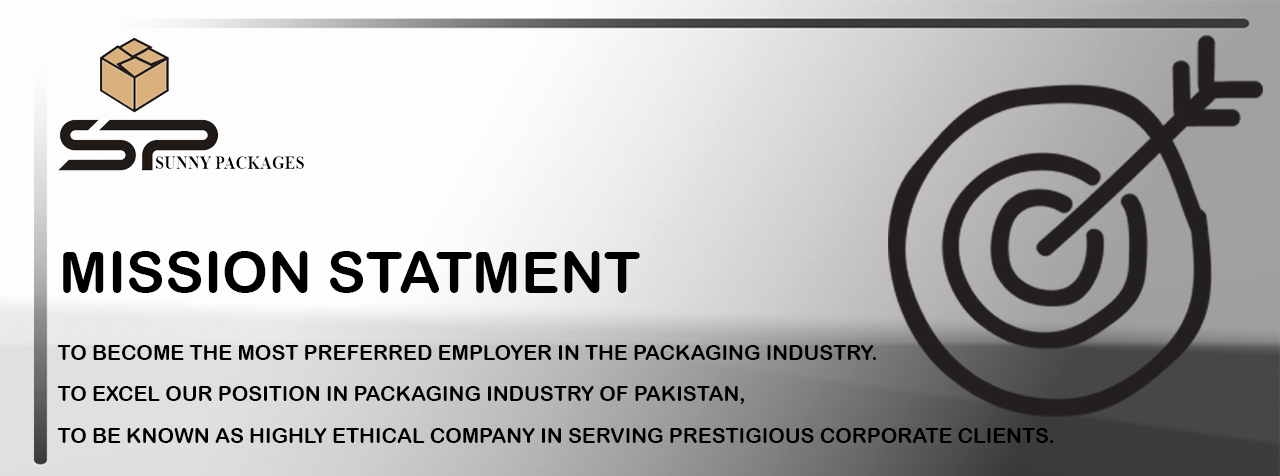
<style>
.page{position:relative;width:1280px;height:476px}
.page>*{position:absolute;margin:0}
.t1{font:58.4px "ArialRoundedMTBold";color:#000000}
.t2{font:20.9px/41.7px "ArialRoundedMTBold";color:#000000;text-transform:uppercase}
</style>
<div class="page">
<p class="t1" style="left:63px;top:251px;width:577px;height:42px">MISSION STATMENT</p>
<p class="t2" style="left:57px;top:345px;width:997px;height:98px">To become the most preferred employer in the packaging industry.<br>To excel our position in packaging industry of pakistan, <br>To be known as highly ethical company in serving prestigious corporate clients.</p>
</div>
